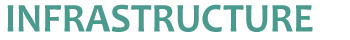
<style>
.page{position:relative;width:350px;height:40px;background:#ffffff}
.page>*{position:absolute;margin:0}
.t1{font:41.2px "Candara-Bold";color:#4a9a8d;scale:0.96 1}
</style>
<div class="page">
<p class="t1" style="left:7px;top:4px;width:306px;height:28px">INFRASTRUCTURE</p>
</div>
